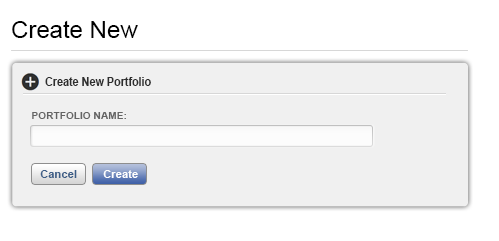
<style>
.page{position:relative;width:499px;height:241px;background:#f0f0f0}
.page>*{position:absolute;margin:0}
.t1{font:24px "ArialMT";color:#000000}
.t2{font:12px "Arial-BoldMT";color:#2e2e2e;scale:0.9 1}
.t3{font:10px "Arial-BoldMT";letter-spacing:0.01em;color:#646464}
.t4{font:11px "Arial-BoldMT";letter-spacing:0.01em;color:#3d5e87}
.t5{font:11px "Arial-BoldMT";letter-spacing:0.01em;color:#ffffff}
</style>
<div class="page">
<p class="t1" style="left:12px;top:20px;width:126px;height:18px">Create New</p>
<p class="t2" style="left:45px;top:77px;width:106px;height:9px">Create New Portfolio</p>
<p class="t3" style="left:32px;top:112px;width:94px;height:7px">PORTFOLIO NAME:</p>
<p class="t4" style="left:40px;top:170px;width:37px;height:8px">Cancel</p>
<p class="t5" style="left:103px;top:170px;width:35px;height:8px">Create</p>
</div>
